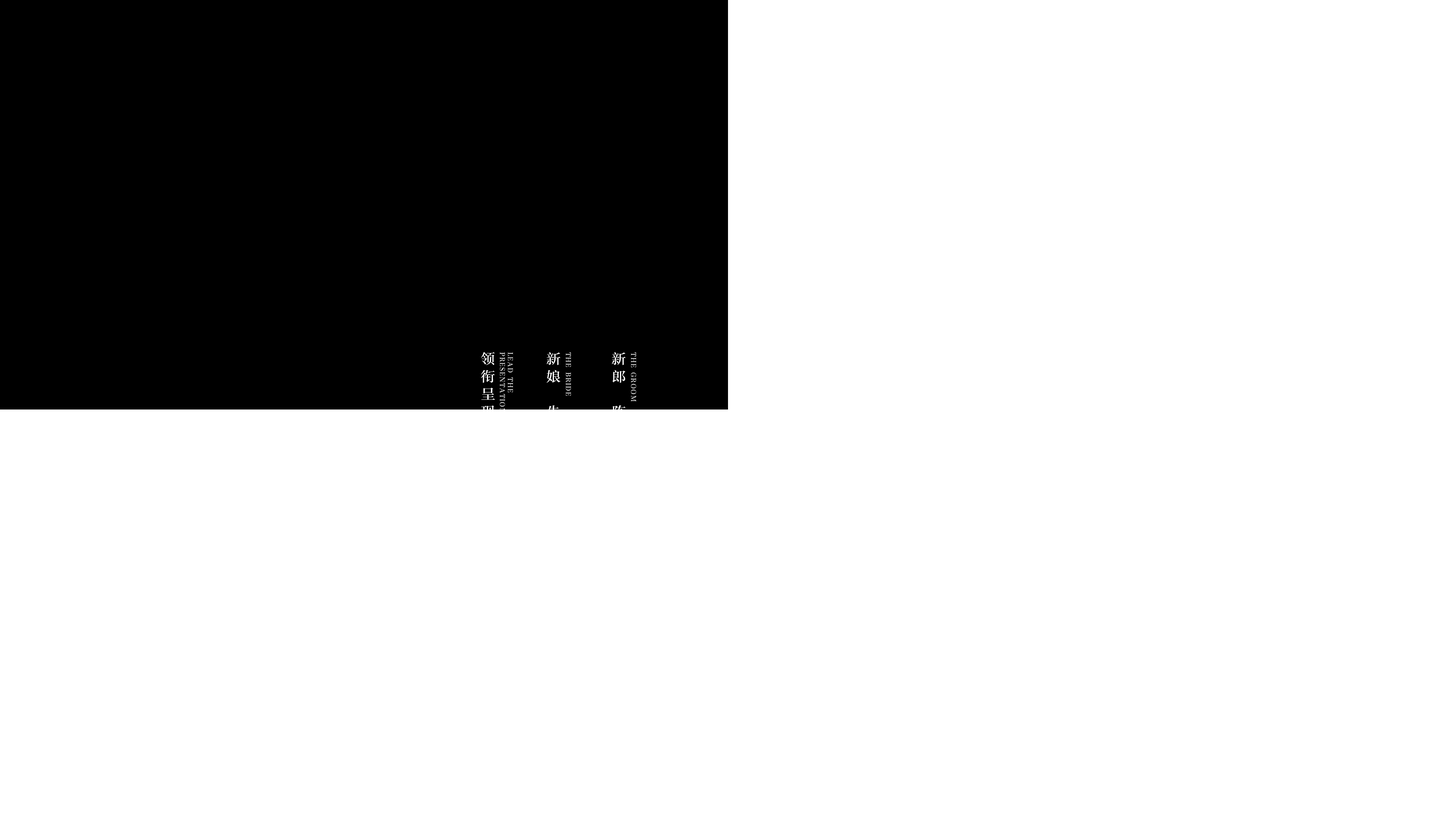
<style>
.page{position:relative;width:1456px;height:819px;background:#ffffff}
.page>*{position:absolute;margin:0}
.t1{font:14.2px/17.6px "FZZYSK--GBK1-0";letter-spacing:0.12em;color:#ffffff;text-transform:uppercase}
.t2{font:6.3px/7.9px "FZZYSK--GBK1-0";letter-spacing:0.12em;color:#ffffff;text-transform:uppercase}
.t3{font:6.3px "FZZYSK--GBK1-0";letter-spacing:0.12em;color:#ffffff;text-transform:uppercase}
</style>
<div class="page">
<p class="t1" style="left:481px;top:352px;width:14px;height:66px;text-align:center">领<br>衔<br>呈<br>现</p>
<p class="t2" style="left:499px;top:352px;width:14px;height:61px;rotate:90deg">lead the <br>presentation</p>
<p class="t1" style="left:546px;top:352px;width:14px;height:101px;text-align:center">新<br>娘<br><br>朱<br>永<br>宏</p>
<p class="t3" style="left:566px;top:352px;width:5px;height:44px;rotate:90deg">THE BRIDE</p>
<p class="t1" style="left:612px;top:352px;width:14px;height:84px;text-align:center">新<br>郎<br><br>陈<br>晗</p>
<p class="t3" style="left:631px;top:352px;width:5px;height:50px;rotate:90deg">THE GROOM</p>
</div>
